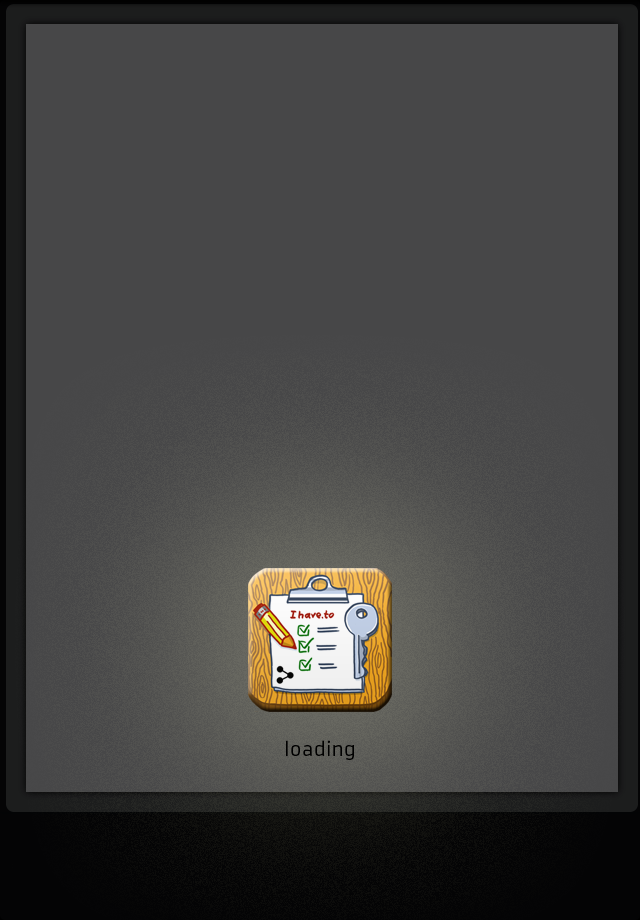
<style>
.page{position:relative;width:640px;height:920px;background:#474748}
.page>*{position:absolute;margin:0}
.t1{font:18px "Armata-Regular";color:#000000}
</style>
<div class="page">
<p class="t1" style="left:286px;top:740px;width:68px;height:20px">loading</p>
</div>
